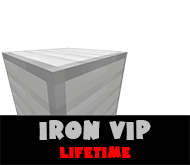
<style>
.page{position:relative;width:190px;height:165px;background:#ffffff}
.page>*{position:absolute;margin:0}
.t1{font:25px "HotMustardBTN";color:#c1c1c1}
.t2{font:15px "HotMustardBTN";color:#ff0000}
</style>
<div class="page">
<p class="t1" style="left:39px;top:120px;width:112px;height:20px">Iron VIP</p>
<p class="t2" style="left:59px;top:146px;width:72px;height:12px">Lifetime</p>
</div>
